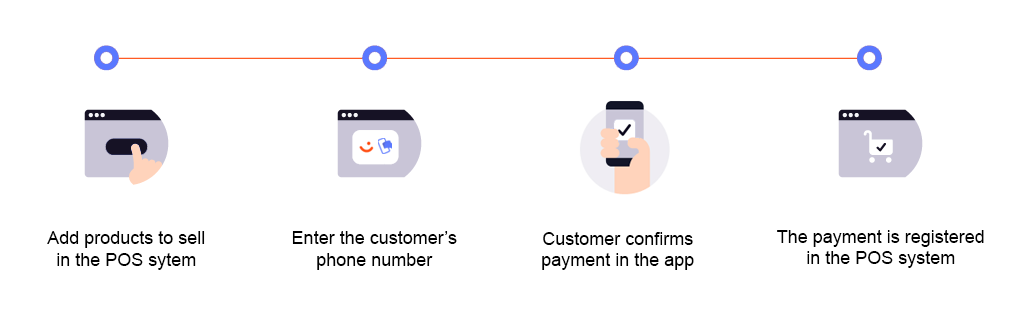
<style>
.page{position:relative;width:1028px;height:314px;background:#ffffff}
.page>*{position:absolute;margin:0}
.t1{font:18px "ArialMT";color:#000000}
</style>
<div class="page">
<p class="t1" style="left:47px;top:231px;width:158px;height:39px;text-align:center">Add products to sell<br>in the POS sytem</p>
<p class="t1" style="left:292px;top:231px;width:165px;height:39px;text-align:center">Enter the customer’s<br>phone number</p>
<p class="t1" style="left:542px;top:232px;width:152px;height:38px;text-align:center">Customer confirms<br>payment in the app</p>
<p class="t1" style="left:777px;top:230px;width:207px;height:38px;text-align:center">The payment is registered<br>in the POS system</p>
</div>
